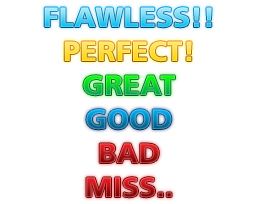
<style>
.page{position:relative;width:256px;height:204px;background:#ffffff}
.page>*{position:absolute;margin:0}
.t1{font:28px "FrutigerLTStd-Black"}
</style>
<div class="page">
<p class="t1" style="left:64px;top:41px;width:128px;height:21px">PERFECT!</p>
<p class="t1" style="left:83px;top:75px;width:92px;height:21px">GREAT</p>
<p class="t1" style="left:86px;top:109px;width:86px;height:21px">GOOD</p>
<p class="t1" style="left:99px;top:143px;width:60px;height:20px">BAD</p>
<p class="t1" style="left:86px;top:177px;width:86px;height:21px">MISS..</p>
</div>
